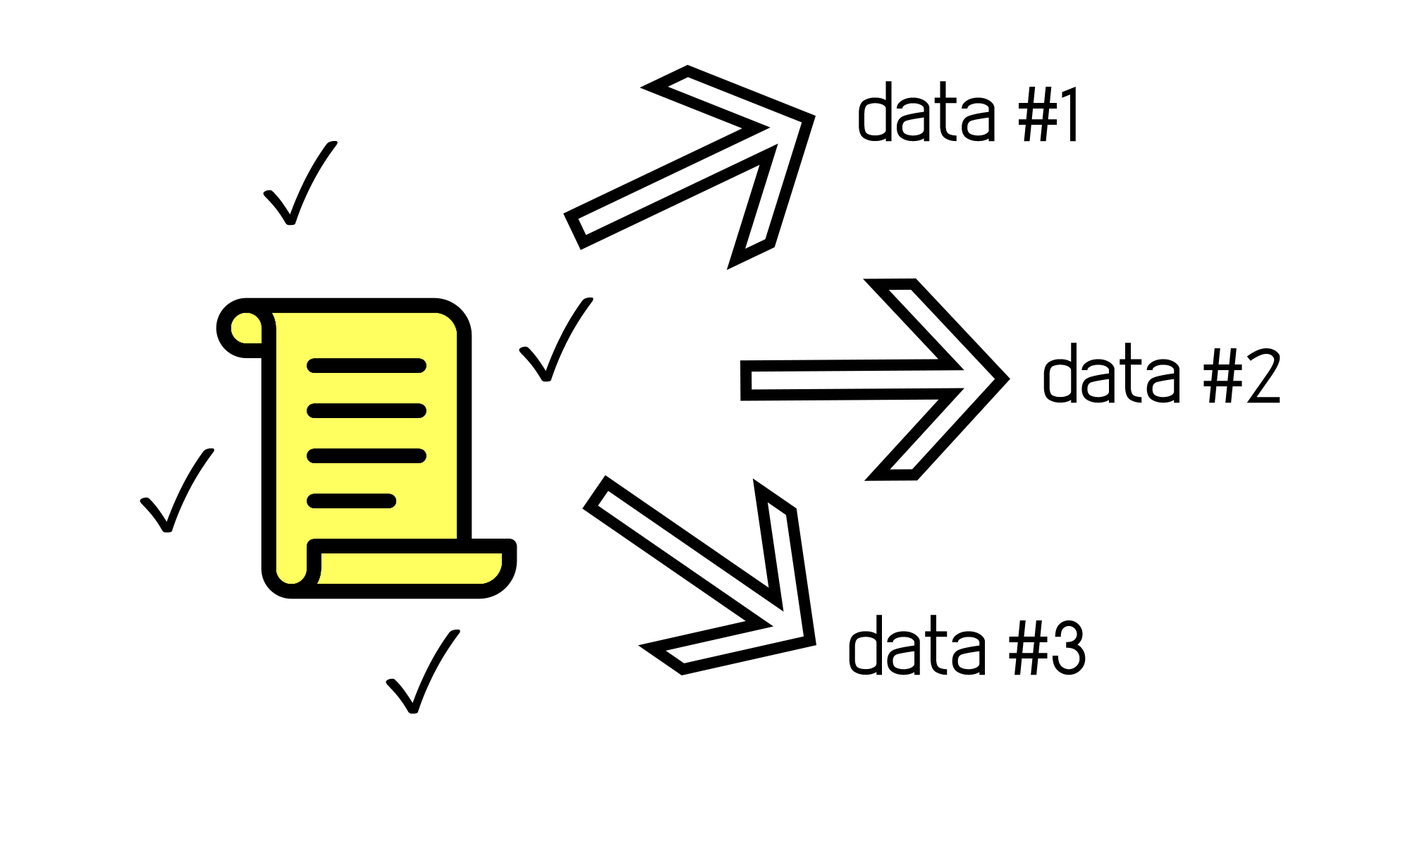
<style>
.page{position:relative;width:1410px;height:846px;background:#ffffff}
.page>*{position:absolute;margin:0}
.t1{font:55.5px "EleganTech";color:#000000}
.t2{font:112.8px "SegoeUISymbol";color:#000000}
</style>
<div class="page">
<p class="t1" style="left:859px;top:81px;width:217px;height:61px">data #1</p>
<p class="t2" style="left:263px;top:140px;width:75px;height:86px">✓</p>
<p class="t2" style="left:519px;top:297px;width:75px;height:85px">✓</p>
<p class="t1" style="left:1043px;top:343px;width:237px;height:60px">data #2</p>
<p class="t2" style="left:140px;top:448px;width:74px;height:85px">✓</p>
<p class="t1" style="left:849px;top:615px;width:237px;height:60px">data #3</p>
<p class="t2" style="left:386px;top:629px;width:74px;height:85px">✓</p>
</div>
